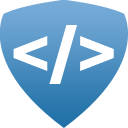
<style>
.page{position:relative;width:128px;height:128px;background:#ffffff}
.page>*{position:absolute;margin:0}
.t1{font:72px "Impact";color:#ffffff}
</style>
<div class="page">
<p class="t1" style="left:13px;top:25px;width:101px;height:59px">&lt;/&gt;</p>
</div>
